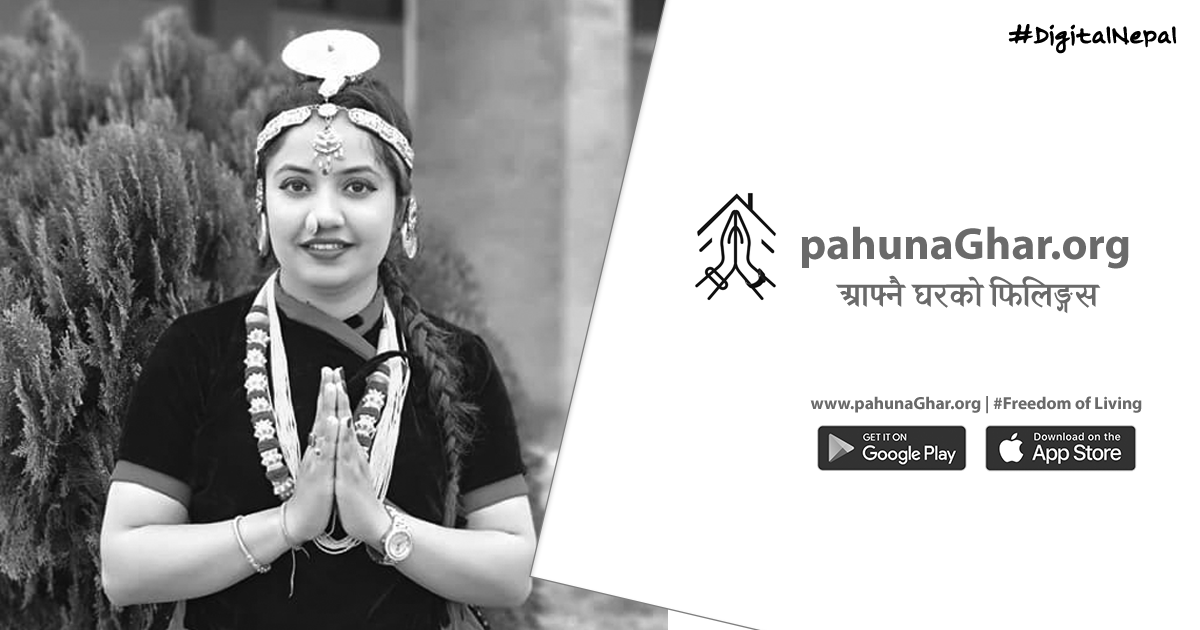
<style>
.page{position:relative;width:1200px;height:630px;background:#ffffff}
.page>*{position:absolute;margin:0}
.t1{font:24px "Pracas";color:#000000}
.t2{font:45.3px "MyriadPro-Bold";color:#6a6a6a}
.t3{font:45.3px "jdrHarkaBunma";color:#6a6a6a}
.t4{font:17.3px "MyriadPro-Bold";color:#6a6a6a}
</style>
<div class="page">
<p class="t1" style="left:1008px;top:24px;width:169px;height:30px">#DigitalNepal</p>
<p class="t2" style="left:801px;top:226px;width:328px;height:43px">pahunaGhar.org</p>
<p class="t3" style="left:835px;top:275px;width:266px;height:39px">cfËg} 3/sf] lkmln©;</p>
<p class="t4" style="left:810px;top:396px;width:332px;height:18px">www.pahunaGhar.org | #Freedom of Living</p>
</div>
